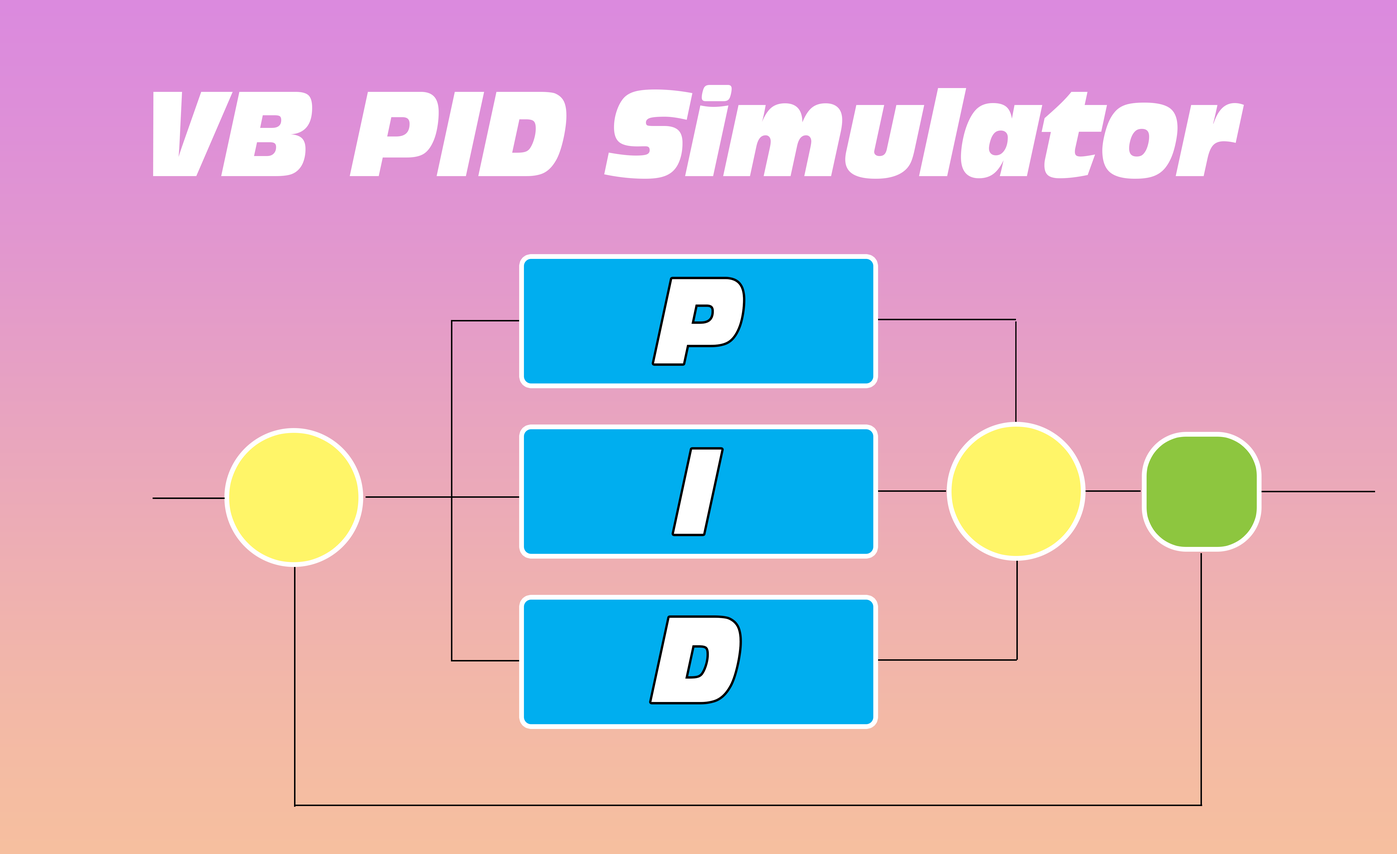
<style>
.page{position:relative;width:1397px;height:854px}
.page>*{position:absolute;margin:0}
.t1{font:113.3px "Incised901BT-NordItalic";color:#ffffff;scale:0.81 1}
</style>
<div class="page">
<p class="t1" style="left:153px;top:85px;width:1091px;height:94px">VB PID Simulator</p>
<p class="t1" style="left:654px;top:279px;width:89px;height:84px">P</p>
<p class="t1" style="left:674px;top:449px;width:47px;height:84px">I</p>
<p class="t1" style="left:651px;top:617px;width:89px;height:85px">D</p>
</div>
